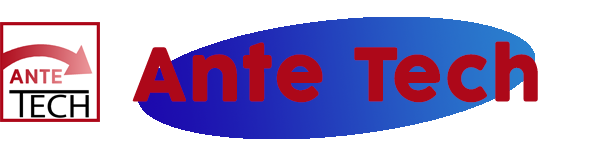
<style>
.page{position:relative;width:609px;height:152px;background:#ffffff}
.page>*{position:absolute;margin:0}
.t1{font:72px "Cocogoose";color:#ad0819;font-weight:bold}
</style>
<div class="page">
<p class="t1" style="left:132px;top:41px;width:406px;height:62px">Ante Tech</p>
</div>
